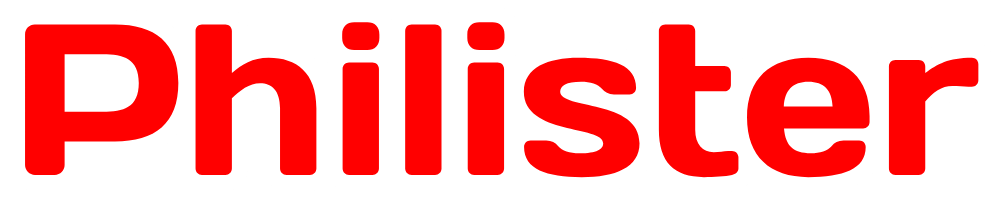
<style>
.page{position:relative;width:1005px;height:200px;background:#ffffff}
.page>*{position:absolute;margin:0}
.t1{font:215px "Days";color:#ff0000}
</style>
<div class="page">
<p class="t1" style="left:25px;top:22px;width:954px;height:156px">Philister</p>
</div>
